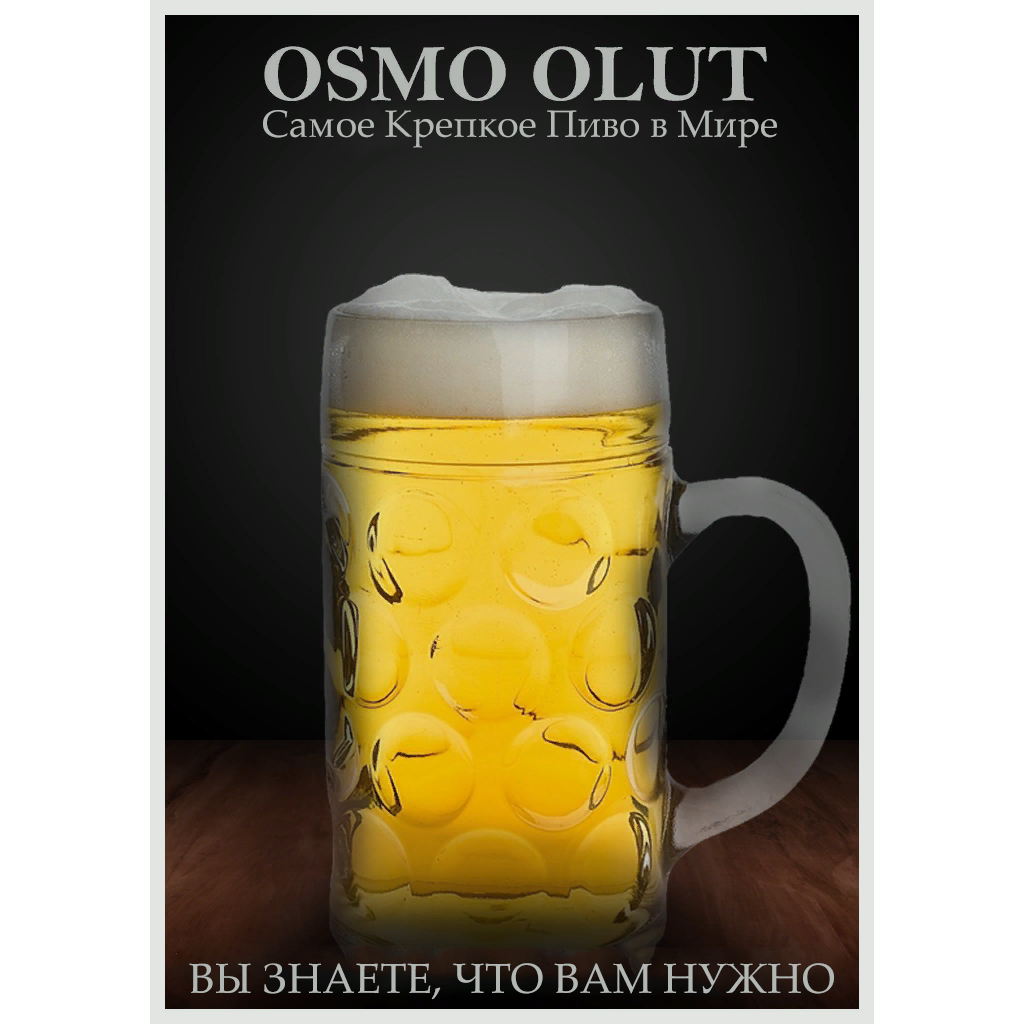
<style>
.page{position:relative;width:1024px;height:1024px;background:#ffffff}
.page>*{position:absolute;margin:0}
.t1{font:38px "PalatinoLinotype-Roman";color:#b3b7b3}
.t2{font:42px "PalatinoLinotype-Roman";color:#b3b7b3}
</style>
<div class="page">
<p class="t1" style="left:263px;top:110px;width:514px;height:38px">Самое Крепкое Пиво в Мире</p>
<p class="t2" style="left:189px;top:963px;width:645px;height:37px">ВЫ ЗНАЕТЕ, ЧТО ВАМ НУЖНО</p>
</div>
